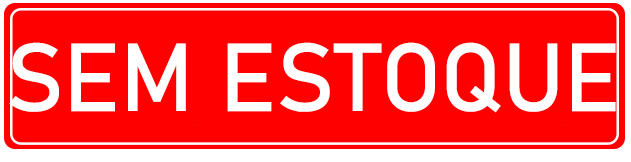
<style>
.page{position:relative;width:631px;height:162px;background:#ff0000}
.page>*{position:absolute;margin:0}
.t1{font:95px "Bahnschrift";color:#ffffff}
</style>
<div class="page">
<p class="t1" style="left:9px;top:42px;width:607px;height:71px">SEM ESTOQUE</p>
</div>
